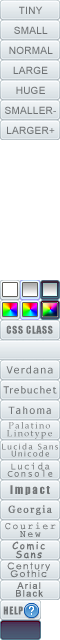
<style>
.page{position:relative;width:60px;height:640px;background:#dbe2e6}
.page>*{position:absolute;margin:0}
.t1{font:10px/20px "ArialMT";letter-spacing:0.025em;color:#6f7274}
.t2{font:10px "Impact";letter-spacing:0.05em;color:#727576}
.t3{font:10px "Verdana";letter-spacing:0.1em;color:#717476}
.t4{font:10px "TrebuchetMS";letter-spacing:0.1em;color:#717476}
.t5{font:10px "Tahoma";letter-spacing:0.15em;color:#707375}
.t6{font:9px/6px "PalatinoLinotype-Roman";letter-spacing:0.15em}
.t7{font:8px/6px "LucidaSansUnicode";letter-spacing:0.15em}
.t8{font:9px/6px "LucidaConsole";letter-spacing:0.15em}
.t9{font:11px "Impact";letter-spacing:0.15em;color:#717476}
.t10{font:10px "Georgia";letter-spacing:0.15em;color:#717476}
.t11{font:10px/6px "CourierNewPSMT";letter-spacing:0.15em;color:#6d7072}
.t12{font:10px/6px "ComicSansMS";letter-spacing:0.15em;color:#6f7274}
.t13{font:9px/6px "CenturyGothic";letter-spacing:0.15em;color:#727577}
.t14{font:9px/6px "ArialMT";letter-spacing:0.15em;color:#717476}
.t15{font:10px "Impact";letter-spacing:0.05em;color:#717476}
</style>
<div class="page">
<p class="t1" style="left:5px;top:6px;width:51px;height:128px;text-align:center">TINY<br>SMALL<br>NORMAL<br>LARGE<br>HUGE<br>SMALLER-<br>LARGER+</p>
<p class="t2" style="left:6px;top:325px;width:47px;height:9px">CSS CLASS</p>
<p class="t3" style="left:6px;top:365px;width:47px;height:9px">Verdana</p>
<p class="t4" style="left:3px;top:386px;width:54px;height:8px">Trebuchet</p>
<p class="t5" style="left:8px;top:406px;width:43px;height:8px">Tahoma</p>
<p class="t6" style="left:7px;top:422px;width:45px;height:17px;text-align:center">Palatino<br>Linotype</p>
<p class="t7" style="left:2px;top:443px;width:56px;height:14px;text-align:center">Lucida Sans<br>Unicode</p>
<p class="t8" style="left:7px;top:462px;width:46px;height:15px;text-align:center">Lucida<br>Console</p>
<p class="t9" style="left:10px;top:485px;width:40px;height:10px">Impact</p>
<p class="t10" style="left:8px;top:505px;width:44px;height:10px">Georgia</p>
<p class="t11" style="left:5px;top:522px;width:51px;height:16px;text-align:center">Courier<br>New</p>
<p class="t12" style="left:12px;top:541px;width:33px;height:18px;text-align:center">Comic<br>Sans</p>
<p class="t13" style="left:7px;top:562px;width:43px;height:16px;text-align:center">Century<br>Gothic</p>
<p class="t14" style="left:16px;top:582px;width:27px;height:15px;text-align:center">Arial<br>Black</p>
<p class="t15" style="left:3px;top:606px;width:20px;height:9px">HELP</p>
</div>
